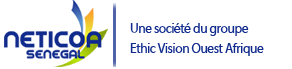
<style>
.page{position:relative;width:292px;height:69px;background:#ffffff}
.page>*{position:absolute;margin:0}
.t1{font:13.7px/20.1px "Myriad-Web";letter-spacing:-0.035em;color:#112b8d;scale:0.95 1}
</style>
<div class="page">
<p class="t1" style="left:130px;top:23px;width:134px;height:33px">Une société du groupe<br>Ethic Vision Ouest Afrique</p>
</div>
